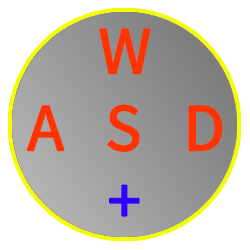
<style>
.page{position:relative;width:250px;height:250px;background:#ffffff}
.page>*{position:absolute;margin:0}
.t1{font:60px "SourceHanSansCN-Regular";letter-spacing:-0.05em;color:#ff3400;font-weight:bold}
.t2{font:60px "SourceHanSansCN-Regular";letter-spacing:-0.05em;color:#888888;font-weight:bold}
.t3{font:60px "SourceHanSansCN-Regular";letter-spacing:-0.05em;color:#3400ff;font-weight:bold}
</style>
<div class="page">
<p class="t1" style="left:99px;top:28px;width:52px;height:47px">W<span class="t2">F</span></p>
<p class="t1" style="left:26px;top:105px;width:39px;height:47px">A</p>
<p class="t1" style="left:107px;top:104px;width:33px;height:48px">S</p>
<p class="t1" style="left:188px;top:105px;width:35px;height:47px">D</p>
<p class="t3" style="left:109px;top:184px;width:31px;height:33px">+</p>
</div>
